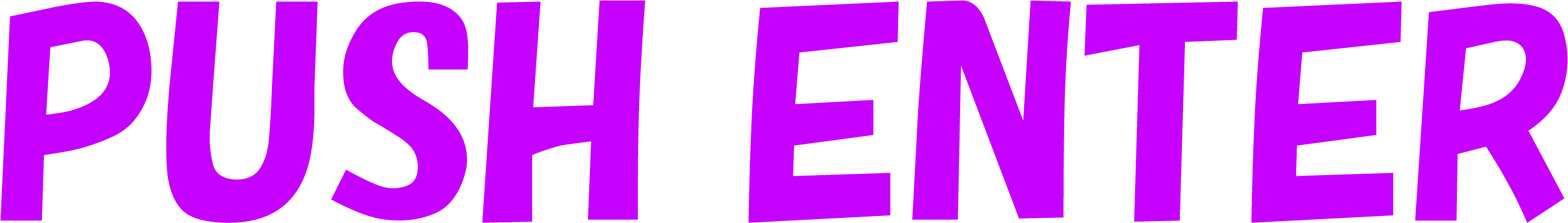
<style>
.page{position:relative;width:1568px;height:223px;background:#c600ff}
.page>*{position:absolute;margin:0}
.t1{font:270.5px "HGSSoeiKakupoptai";color:#c600ff}
</style>
<div class="page">
<p class="t1" style="left:0px;top:0px;width:1568px;height:223px">PUSH ENTER</p>
</div>
